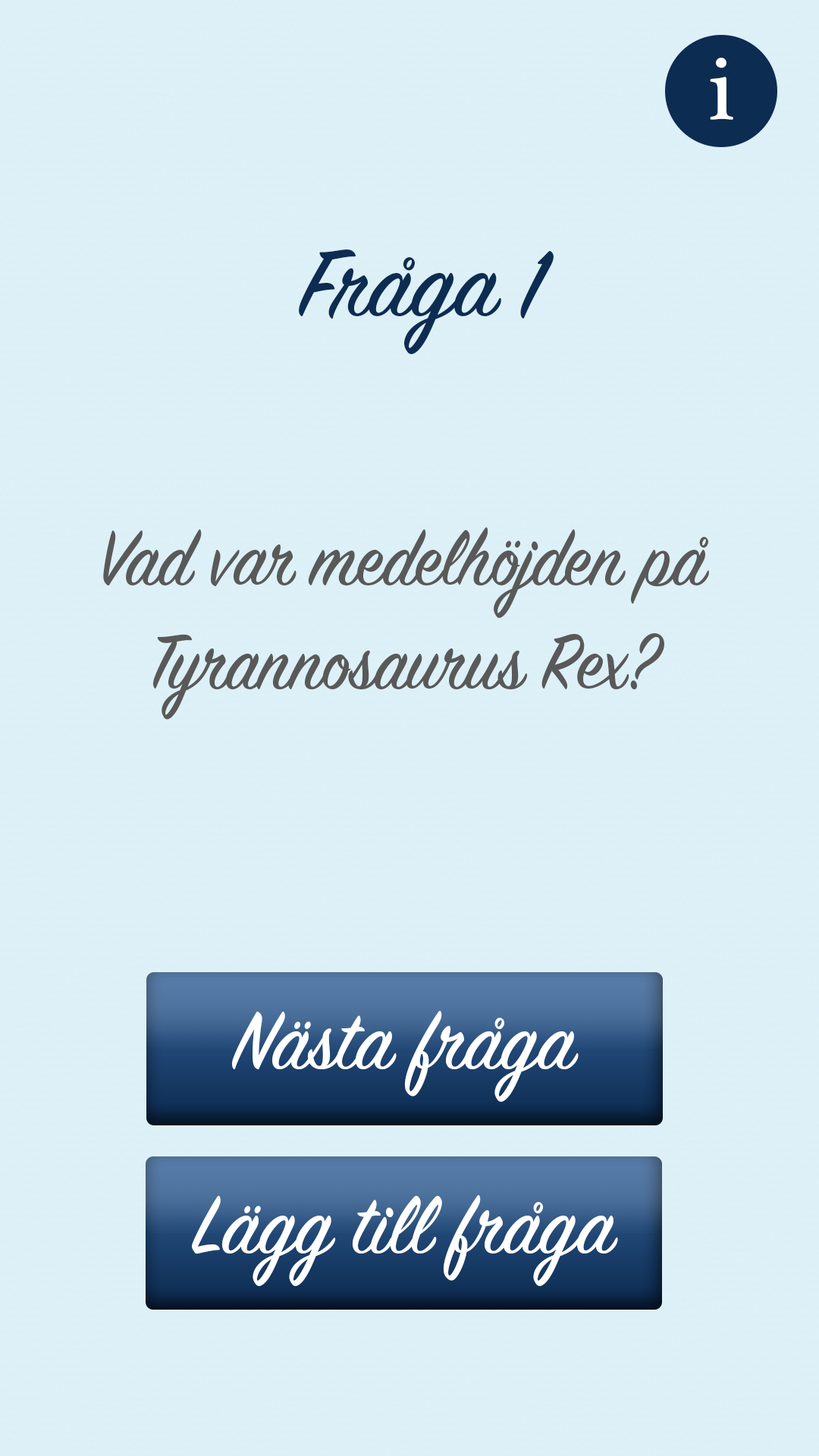
<style>
.page{position:relative;width:819px;height:1456px;background:#dcf0f7}
.page>*{position:absolute;margin:0}
.t1{font:91px "PlantagenetCherokee";color:#ffffff}
.t2{font:106.2px "SignPainter-HouseScript";color:#0c2c52}
.t3{font:86.4px "SignPainter-HouseScript";color:#595959;scale:0.95 1}
.t4{font:91px "SignPainter-HouseScript";color:#ffffff}
</style>
<div class="page">
<p class="t1" style="left:710px;top:58px;width:23px;height:62px">i</p>
<p class="t2" style="left:299px;top:249px;width:255px;height:105px">Fråga 1</p>
<p class="t3" style="left:103px;top:527px;width:606px;height:193px;text-align:center">Vad var medelhöjden på <br>Tyrannosaurus Rex?</p>
<p class="t4" style="left:232px;top:1011px;width:347px;height:91px">Nästa fråga</p>
<p class="t4" style="left:192px;top:1195px;width:426px;height:91px">Lägg till fråga</p>
</div>
